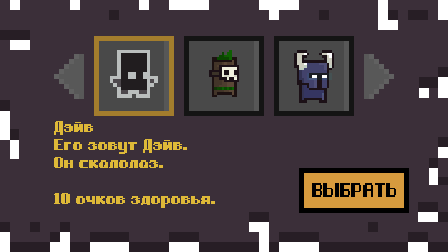
<style>
.page{position:relative;width:448px;height:252px;background:#3b2f39}
.page>*{position:absolute;margin:0}
.t1{font:10px/18px "Gnomoria_rus";color:#deb938;font-weight:bold}
.t2{font:12.4px "Gnomoria_rus";color:#000000;text-transform:uppercase;font-weight:bold}
</style>
<div class="page">
<p class="t1" style="left:54px;top:121px;width:161px;height:87px">Дэйв<br>Его зовут Дэйв.<br>Он скалолаз.<br><br>10 очков здоровья.</p>
<p class="t2" style="left:312px;top:183px;width:84px;height:14px">ВЫiбрать</p>
</div>
